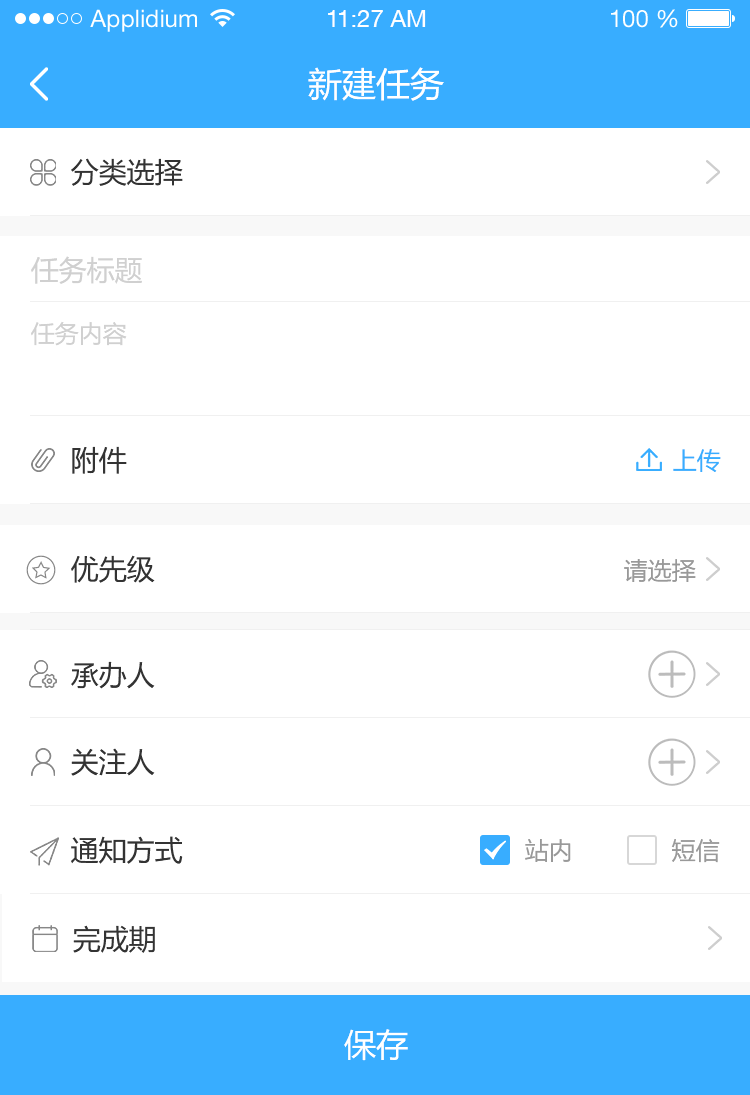
<style>
.page{position:relative;width:750px;height:1095px;background:#ffffff}
.page>*{position:absolute;margin:0}
.t1{font:24px "HelveticaNeueLTStd-Roman";color:#ffffff}
.t2{font:24px "HelveticaNeueCE-Roman";color:#ffffff}
.t3{font:34px "MicrosoftYaHei";color:#ffffff}
.t4{font:28px "MicrosoftYaHei";color:#333333}
.t5{font:28px "MicrosoftYaHei";color:#d0d0d0}
.t6{font:24px "MicrosoftYaHei";color:#d0d0d0}
.t7{font:24px "MicrosoftYaHei";color:#38adff}
.t8{font:24px "MicrosoftYaHei";color:#999999}
.t9{font:32px "MicrosoftYaHei";color:#ffffff}
</style>
<div class="page">
<p class="t1" style="left:90px;top:9px;width:107px;height:23px">Applidium</p>
<p class="t2" style="left:328px;top:10px;width:98px;height:17px">11:27 AM</p>
<p class="t1" style="left:611px;top:9px;width:67px;height:19px">100 %</p>
<p class="t3" style="left:308px;top:67px;width:136px;height:34px">新建任务</p>
<p class="t4" style="left:71px;top:158px;width:112px;height:28px">分类选择</p>
<p class="t5" style="left:31px;top:256px;width:111px;height:28px">任务标题</p>
<p class="t6" style="left:31px;top:321px;width:96px;height:25px">任务内容</p>
<p class="t4" style="left:72px;top:446px;width:55px;height:28px">附件</p>
<p class="t7" style="left:673px;top:449px;width:48px;height:23px">上传</p>
<p class="t4" style="left:71px;top:555px;width:84px;height:28px">优先级</p>
<p class="t8" style="left:624px;top:559px;width:72px;height:23px">请选择</p>
<p class="t4" style="left:71px;top:661px;width:84px;height:28px">承办人</p>
<p class="t4" style="left:71px;top:748px;width:84px;height:28px">关注人</p>
<p class="t4" style="left:71px;top:836px;width:112px;height:28px">通知方式</p>
<p class="t8" style="left:525px;top:839px;width:46px;height:23px">站内</p>
<p class="t8" style="left:671px;top:839px;width:49px;height:24px">短信</p>
<p class="t4" style="left:73px;top:925px;width:82px;height:28px">完成期</p>
<p class="t9" style="left:344px;top:1029px;width:64px;height:32px">保存</p>
</div>
